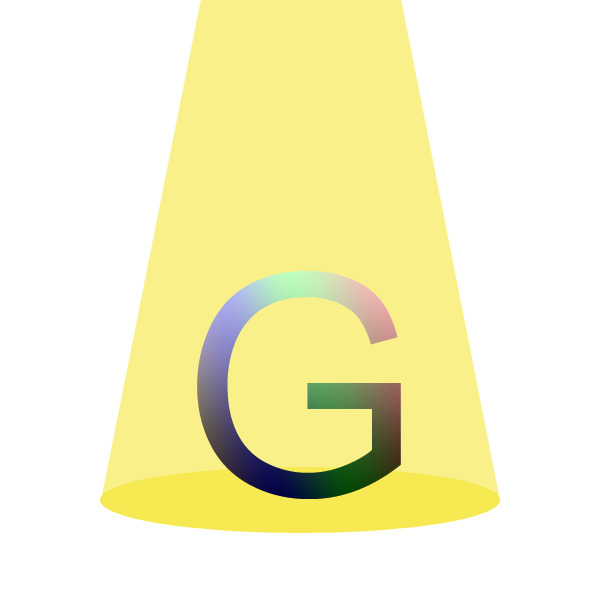
<style>
.page{position:relative;width:600px;height:600px;background:#ffffff}
.page>*{position:absolute;margin:0}
.t1{font:306.9px "ArialMT"}
</style>
<div class="page">
<p class="t1" style="left:197px;top:271px;width:204px;height:228px">G</p>
</div>
